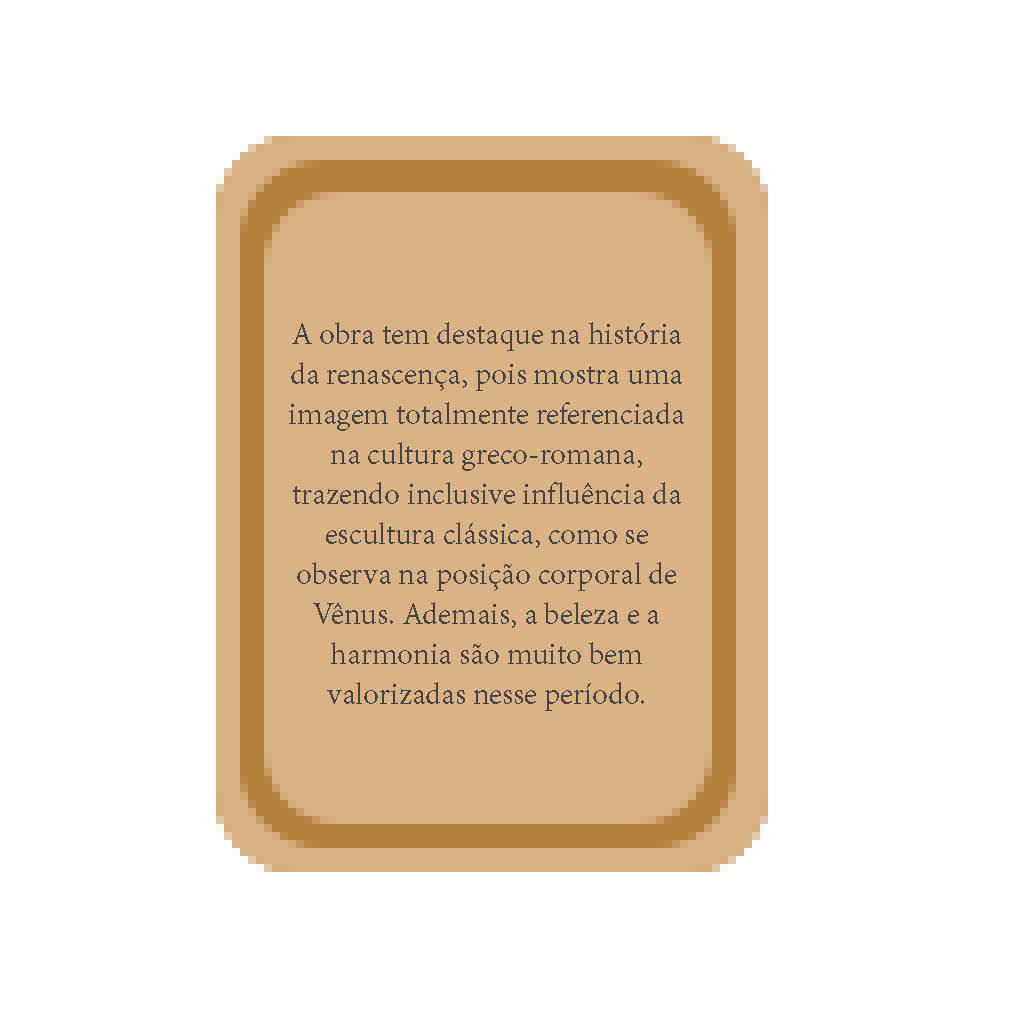
<style>
.page{position:relative;width:1024px;height:1024px;background:#ffffff}
.page>*{position:absolute;margin:0}
.t1{font:33.3px "AdobeDevanagari-Regular";color:#454545}
</style>
<div class="page">
<p class="t1" style="left:289px;top:322px;width:395px;height:389px;text-align:center">A obra tem destaque na história da renascença, pois mostra uma imagem totalmente referenciada na cultura greco-romana, trazendo inclusive influência da escultura clássica, como se observa na posição corporal de Vênus. Ademais, a beleza e a harmonia são muito bem valorizadas nesse período.</p>
</div>
